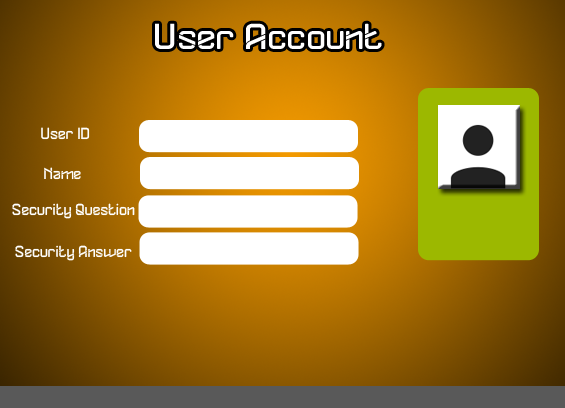
<style>
.page{position:relative;width:565px;height:408px}
.page>*{position:absolute;margin:0}
.t1{font:35.9px "DYLOVASTUFF";color:#ffffff;scale:1.1 1}
.t2{font:16px "DYLOVASTUFF";color:#ffffff}
</style>
<div class="page">
<p class="t1" style="left:155px;top:23px;width:227px;height:26px">User Account</p>
<p class="t2" style="left:41px;top:127px;width:49px;height:13px">User ID</p>
<p class="t2" style="left:44px;top:167px;width:37px;height:13px">Name</p>
<p class="t2" style="left:12px;top:203px;width:123px;height:16px">Security Question</p>
<p class="t2" style="left:15px;top:245px;width:117px;height:16px">Security Answer</p>
</div>
